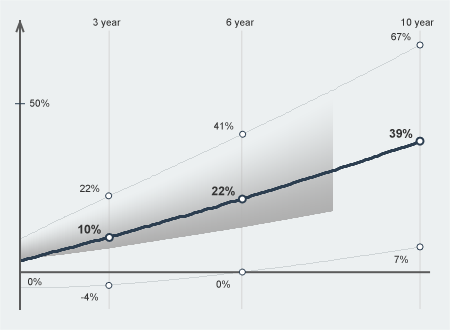
<style>
.page{position:relative;width:450px;height:330px;background:#ecf0f1}
.page>*{position:absolute;margin:0}
.t1{font:10px "ArialMT";color:#333333}
.t2{font:12px "Arial-BoldMT";color:#333333}
</style>
<div class="page">
<p class="t1" style="left:93px;top:18px;width:28px;height:10px">3 year</p>
<p class="t1" style="left:226px;top:18px;width:28px;height:10px">6 year</p>
<p class="t1" style="left:401px;top:18px;width:33px;height:10px">10 year</p>
<p class="t1" style="left:391px;top:33px;width:20px;height:8px">67%</p>
<p class="t1" style="left:30px;top:99px;width:20px;height:8px">50%</p>
<p class="t1" style="left:214px;top:122px;width:20px;height:8px">41%</p>
<p class="t2" style="left:389px;top:129px;width:24px;height:9px">39%</p>
<p class="t1" style="left:80px;top:184px;width:20px;height:8px">22%</p>
<p class="t2" style="left:211px;top:186px;width:24px;height:10px">22%</p>
<p class="t2" style="left:78px;top:224px;width:23px;height:10px">10%</p>
<p class="t1" style="left:394px;top:255px;width:14px;height:8px">7%</p>
<p class="t1" style="left:28px;top:278px;width:14px;height:8px">0%</p>
<p class="t1" style="left:216px;top:280px;width:14px;height:8px">0%</p>
<p class="t1" style="left:81px;top:293px;width:17px;height:8px">-4%</p>
</div>
